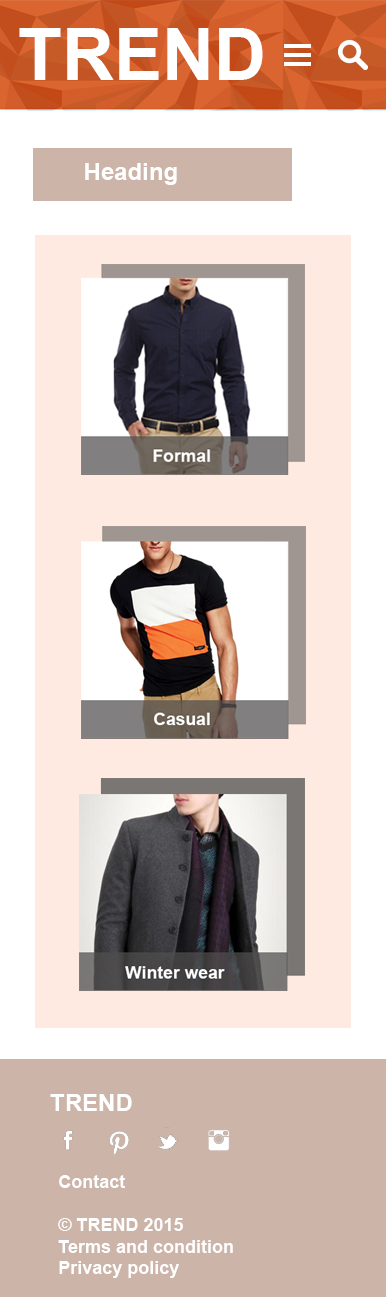
<style>
.page{position:relative;width:386px;height:1297px;background:#ffffff}
.page>*{position:absolute;margin:0}
.t1{font:72px "Arial-BoldMT";color:#ffffff}
.t2{font:24px "Arial-BoldMT";color:#ffffff}
.t3{font:18px "Arial-BoldMT";color:#ffffff}
</style>
<div class="page">
<p class="t1" style="left:19px;top:28px;width:244px;height:52px">TREND</p>
<p class="t2" style="left:85px;top:163px;width:92px;height:22px">Heading</p>
<p class="t2" style="left:50px;top:1094px;width:82px;height:17px">TREND</p>
<p class="t3" style="left:58px;top:1175px;width:175px;height:103px">Contact<br><br>© TREND 2015<br>Terms and condition <br>Privacy policy</p>
</div>
